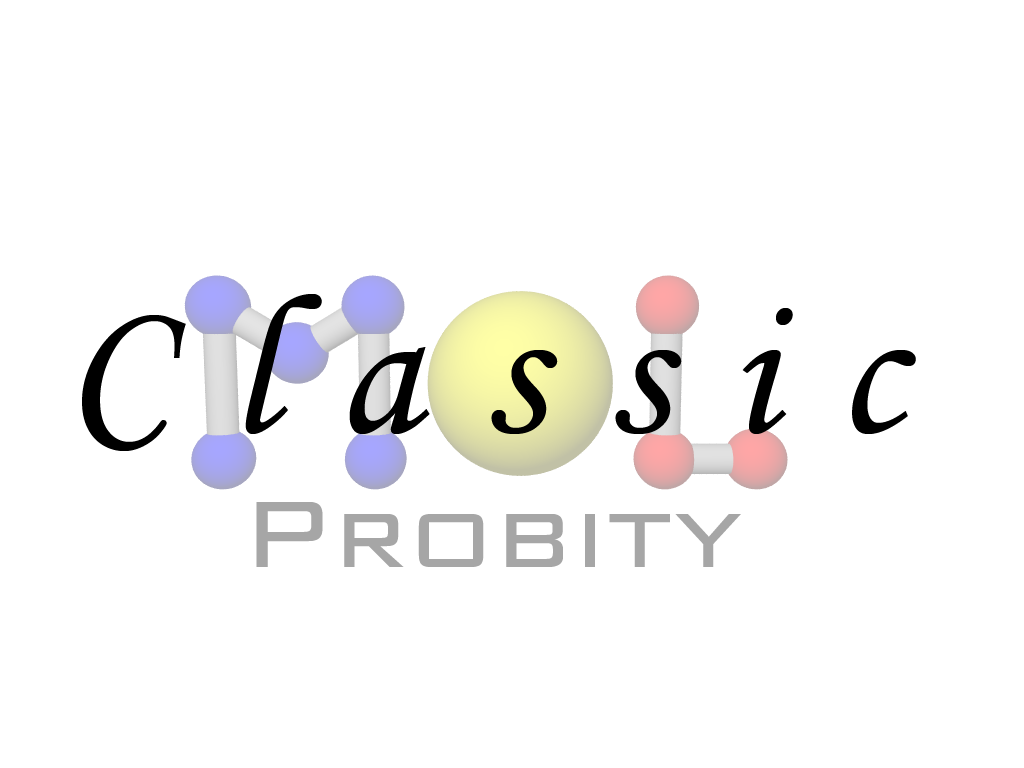
<style>
.page{position:relative;width:1024px;height:768px;background:#ffffff}
.page>*{position:absolute;margin:0}
.t1{font:200px "MonotypeCorsiva";letter-spacing:0.3em;color:#000000}
.t2{font:125px "BankGothicBT-Light";color:#a6a6a6}
</style>
<div class="page">
<p class="t1" style="left:82px;top:294px;width:834px;height:157px">Classic</p>
<p class="t2" style="left:256px;top:502px;width:485px;height:65px">Probity</p>
</div>
